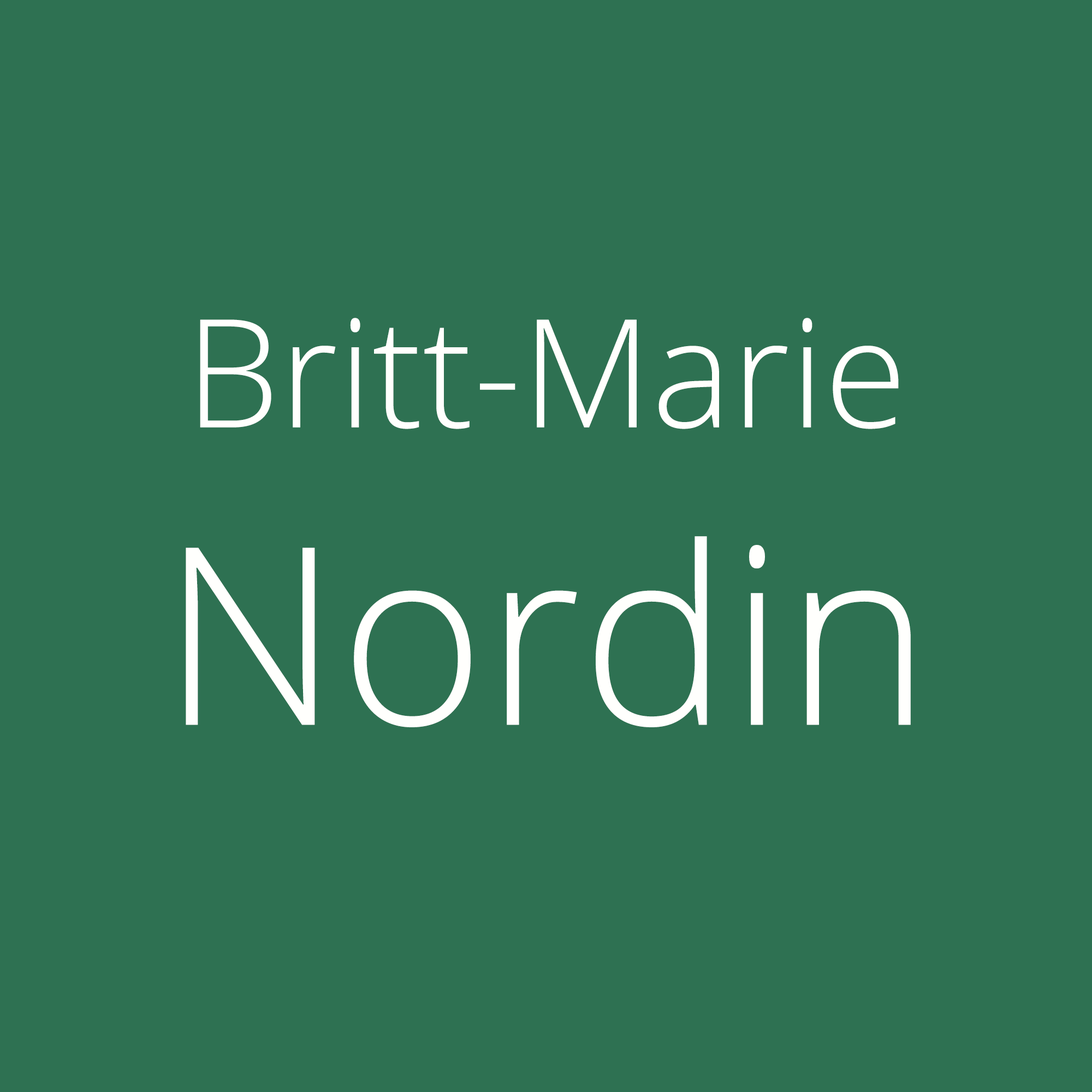
<style>
.page{position:relative;width:1092px;height:1092px;background:#2e7152}
.page>*{position:absolute;margin:0}
.t1{font:150.7px "OpenSans-Light";color:#fffffd}
.t2{font:247.9px "OpenSans-Light";color:#fffffd}
</style>
<div class="page">
<p class="t1" style="left:186px;top:318px;width:725px;height:409px;text-align:center">Britt-Marie<br><span class="t2">Nordin</span></p>
</div>
